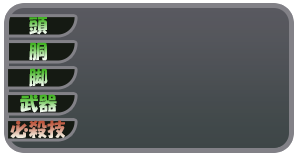
<style>
.page{position:relative;width:297px;height:155px}
.page>*{position:absolute;margin:0}
.t1{font:18.5px "HGSoeiKakupoptai"}
</style>
<div class="page">
<p class="t1" style="left:29px;top:17px;width:18px;height:18px">頭</p>
<p class="t1" style="left:29px;top:42px;width:18px;height:19px">胴</p>
<p class="t1" style="left:29px;top:68px;width:19px;height:19px">脚</p>
<p class="t1" style="left:20px;top:94px;width:37px;height:19px">武器</p>
<p class="t1" style="left:10px;top:120px;width:55px;height:19px">必殺技</p>
</div>
